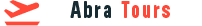
<style>
.page{position:relative;width:202px;height:26px;background:#ffffff}
.page>*{position:absolute;margin:0}
.t1{font:25px "RoundkeySoft-Bold";letter-spacing:0.1em;color:#ff4838}
.t2{font:25px "RoundkeySoft-Bold";letter-spacing:0.1em;color:#162b32}
</style>
<div class="page">
<p class="t1" style="left:70px;top:1px;width:100px;height:17px"><span class="t2">Abra </span>Tours</p>
</div>
